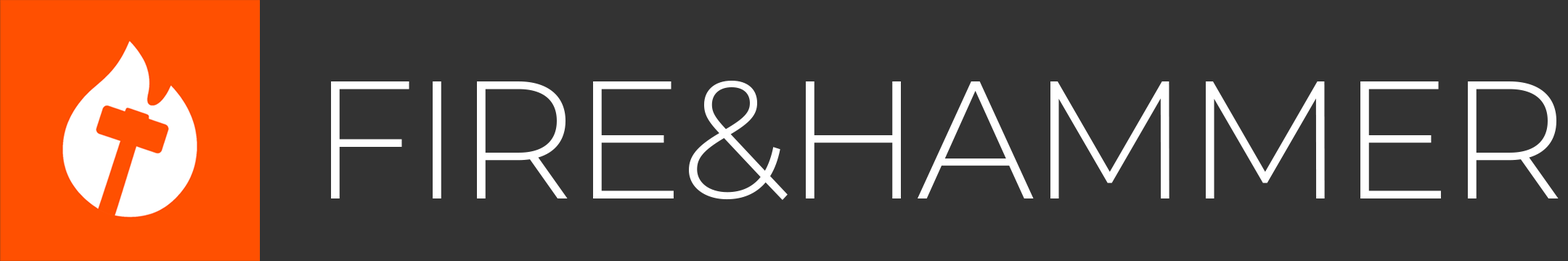
<style>
.page{position:relative;width:1568px;height:261px;background:#333333}
.page>*{position:absolute;margin:0}
.t1{font:166.7px "Montserrat-Light";letter-spacing:-0.025em;color:#ffffff;text-transform:uppercase}
</style>
<div class="page">
<p class="t1" style="left:331px;top:81px;width:1228px;height:119px">fire&amp;Hammer</p>
</div>
